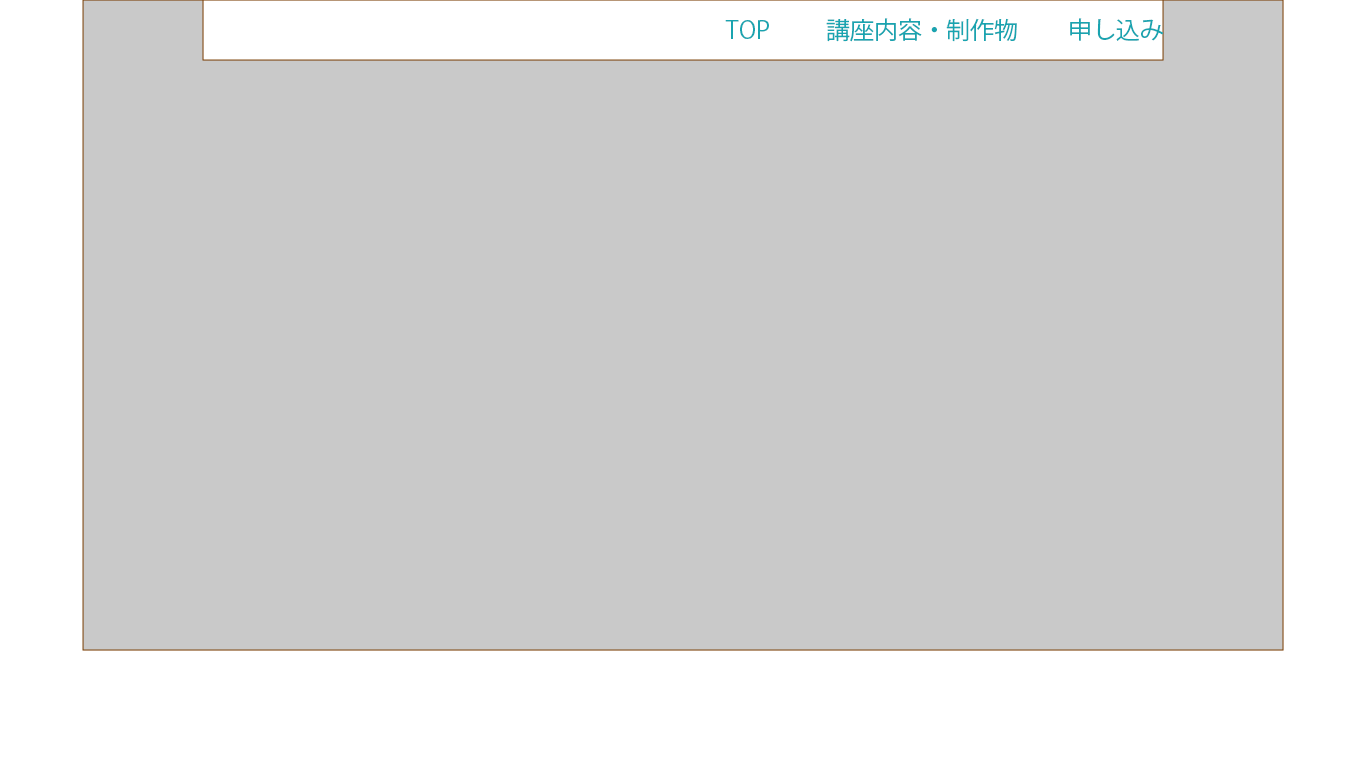
<style>
.page{position:relative;width:1366px;height:768px;background:#c9c9c9}
.page>*{position:absolute;margin:0}
.t1{font:24px "KozGoPr6N-Regular";color:#19a4b0}
</style>
<div class="page">
<p class="t1" style="left:725px;top:20px;width:44px;height:19px">TOP</p>
<p class="t1" style="left:826px;top:18px;width:191px;height:24px">講座内容・制作物</p>
<p class="t1" style="left:1070px;top:18px;width:94px;height:23px">申し込み</p>
</div>
